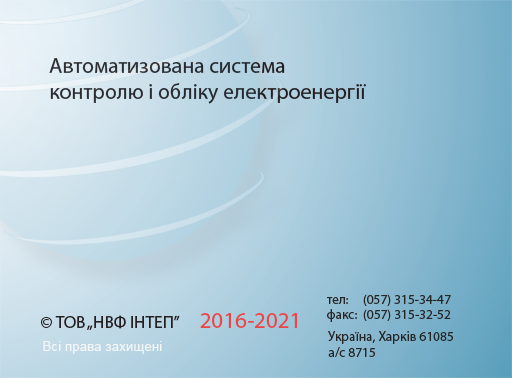
<style>
.page{position:relative;width:512px;height:378px}
.page>*{position:absolute;margin:0}
.t1{font:21.9px "MyriadPro-Regular";color:#231f20}
.t2{font:13.5px "MyriadPro-Regular";color:#252525}
.t3{font:17.3px "MyriadPro-Regular";color:#231f20}
.t4{font:23.1px "MyriadPro-Regular";color:#ef4445}
.t5{font:13.5px "ArialMT";color:#f5f5f6}
</style>
<div class="page">
<p class="t1" style="left:49px;top:58px;width:317px;height:46px">Автоматизована система  <br>контролю і обліку електроенергії</p>
<p class="t2" style="left:327px;top:294px;width:124px;height:12px">тел:     (057) 315-34-47</p>
<p class="t3" style="left:41px;top:315px;width:139px;height:15px">© ТОВ „НВФ ІНТЕП”</p>
<p class="t4" style="left:200px;top:313px;width:97px;height:15px">2016-2021</p>
<p class="t2" style="left:327px;top:309px;width:124px;height:13px">факс:  (057) 315-32-52</p>
<p class="t5" style="left:43px;top:341px;width:119px;height:13px">Всі права захищені</p>
<p class="t2" style="left:328px;top:331px;width:125px;height:26px">Україна, Харків 61085 <br>а/с 8715</p>
</div>
